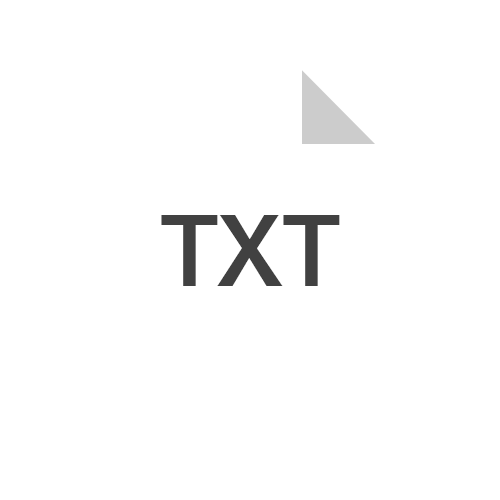
<style>
.page{position:relative;width:500px;height:500px;background:#ffffff}
.page>*{position:absolute;margin:0}
.t1{font:100px "AvenirNext-DemiBold";color:#414141}
</style>
<div class="page">
<p class="t1" style="left:161px;top:215px;width:179px;height:71px">TXT</p>
</div>
